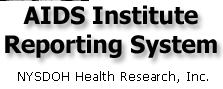
<style>
.page{position:relative;width:223px;height:89px;background:#ffffff}
.page>*{position:absolute;margin:0}
.t1{font:24px "Tahoma-Bold";color:#000000}
.t2{font:12px "Tahoma";letter-spacing:0.075em;color:#000000}
</style>
<div class="page">
<p class="t1" style="left:5px;top:5px;width:212px;height:53px;text-align:center">AIDS Institute<br>Reporting System</p>
<p class="t2" style="left:18px;top:71px;width:190px;height:12px">NYSDOH Health Research, Inc.</p>
</div>
